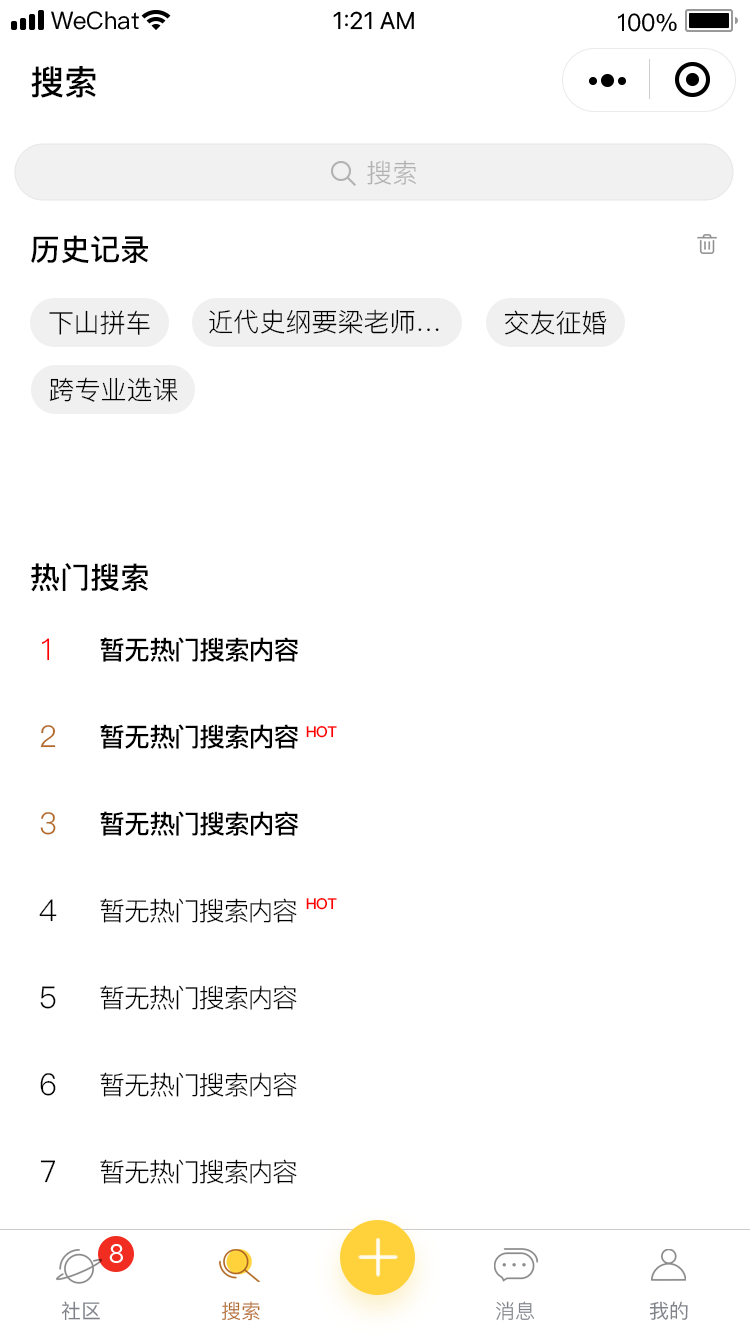
<style>
.page{position:relative;width:750px;height:1334px;background:#ffffff}
.page>*{position:absolute;margin:0}
.t1{font:34px "PingFang-SC-Bold";color:#000000}
.t2{font:26px "PingFangSC-Regular";color:#b2b2b2}
.t3{font:30px "PingFang-SC-Bold";color:#000000}
.t4{font:26px "PingFang-SC-Regular";color:#000000}
.t5{font:30px/91px "PingFang-SC-Regular";color:#000000}
.t6{font:30px/91px "PingFang-SC-Regular";color:#ff0000}
.t7{font:30px/91px "PingFang-SC-Regular";color:#b46b27}
.t8{font:26px/91px "PingFang-SC-Regular";color:#000000}
.t9{font:26px/91px "PingFang-SC-Bold";color:#000000}
.t10{font:15px "PingFang-SC-Heavy";color:#ff0000}
.t11{font:20px "PingFang-SC-Medium";color:#7f8389}
.t12{font:20px "PingFangSC-Regular";color:#b46b27}
.t13{font:20px "PingFangSC-Regular";color:#7f8389}
.t14{font:20px "PingFangSC-Medium";color:#7f8389}
</style>
<div class="page">
<p class="t1" style="left:31px;top:66px;width:65px;height:32px">搜索</p>
<p class="t2" style="left:367px;top:160px;width:49px;height:25px">搜索</p>
<p class="t3" style="left:31px;top:235px;width:117px;height:29px">历史记录</p>
<p class="t4" style="left:49px;top:310px;width:101px;height:25px">下山拼车</p>
<p class="t4" style="left:209px;top:309px;width:230px;height:25px">近代史纲要梁老师…</p>
<p class="t4" style="left:504px;top:310px;width:103px;height:25px">交友征婚</p>
<p class="t4" style="left:49px;top:377px;width:129px;height:25px">跨专业选课</p>
<p class="t3" style="left:31px;top:563px;width:117px;height:29px">热门搜索</p>
<p class="t5" style="left:39px;top:638px;width:18px;height:632px"><span class="t6">1<br></span><span class="t7">2<br>3<br></span>4<br>5<br>6<br>7<br>8</p>
<p class="t8" style="left:100px;top:637px;width:199px;height:634px"><span class="t9">暂无热门搜索内容<br>暂无热门搜索内容<br>暂无热门搜索内容<br></span>暂无热门搜索内容<br>暂无热门搜索内容<br>暂无热门搜索内容<br>暂无热门搜索内容<br>暂无热门搜索内容</p>
<p class="t10" style="left:306px;top:725px;width:31px;height:13px">HOT</p>
<p class="t10" style="left:306px;top:897px;width:31px;height:13px">HOT</p>
<p class="t11" style="left:61px;top:1301px;width:39px;height:20px">社区</p>
<p class="t12" style="left:221px;top:1301px;width:39px;height:20px">搜索</p>
<p class="t13" style="left:496px;top:1301px;width:39px;height:20px">消息</p>
<p class="t14" style="left:649px;top:1301px;width:39px;height:19px">我的</p>
</div>
